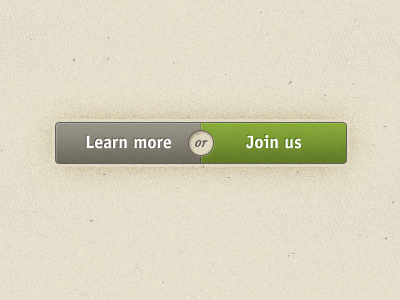
<style>
.page{position:relative;width:400px;height:300px}
.page>*{position:absolute;margin:0}
.t1{font:18px "OffensiveBoldBold";color:#ffffff}
.t2{font:14px "TimesNewRomanPS-BoldItalicMT";color:#625e5b}
</style>
<div class="page">
<p class="t1" style="left:86px;top:135px;width:85px;height:14px">Learn more</p>
<p class="t1" style="left:246px;top:135px;width:55px;height:14px">Join us</p>
<p class="t2" style="left:195px;top:140px;width:13px;height:7px">or</p>
</div>
